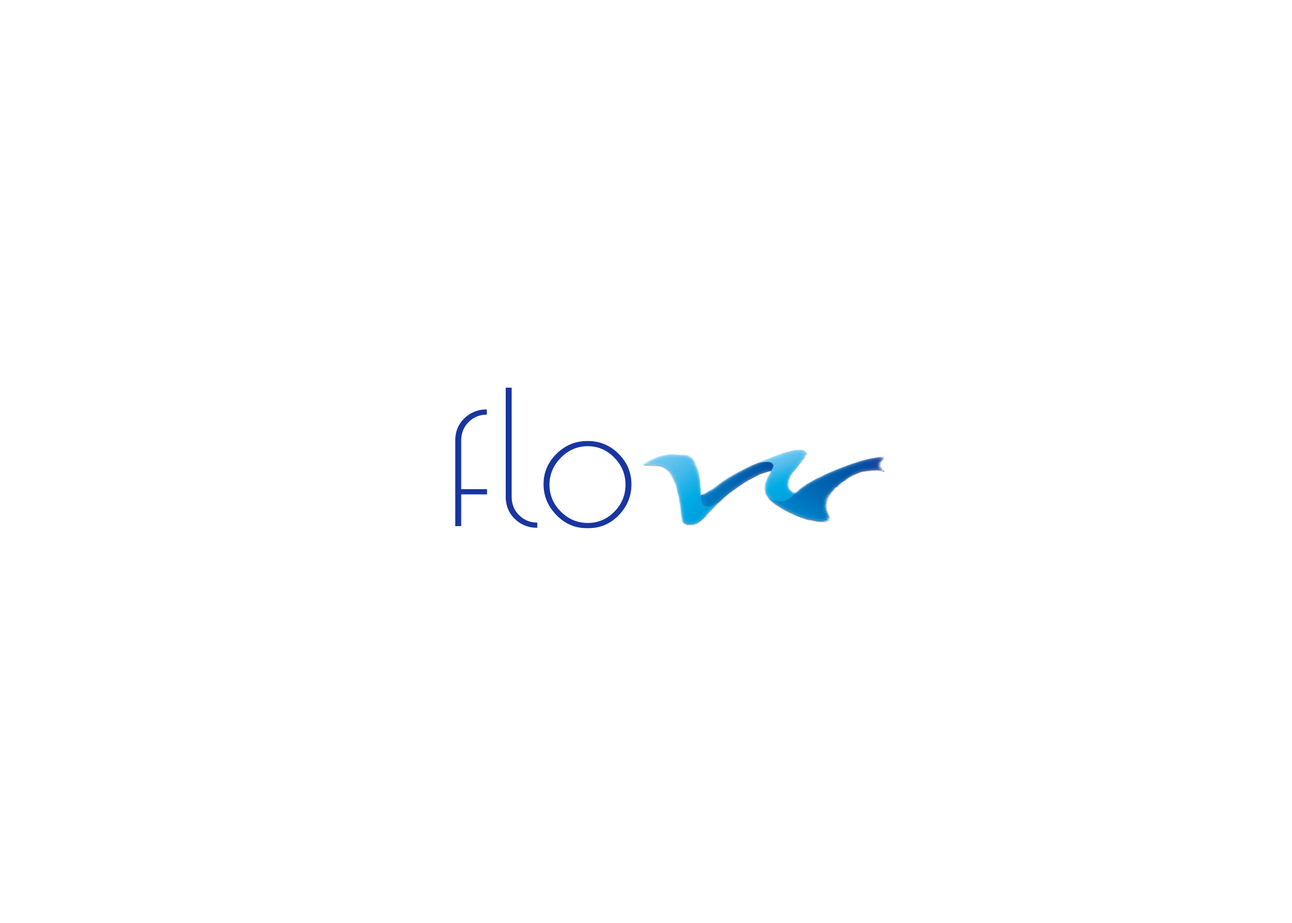
<style>
.page{position:relative;width:1292px;height:923px;background:#ffffff}
.page>*{position:absolute;margin:0}
.t1{font:184.6px "PoiretOne-Regular";letter-spacing:0.02em;color:#1835a0}
</style>
<div class="page">
<p class="t1" style="left:455px;top:388px;width:177px;height:141px">flo</p>
</div>
